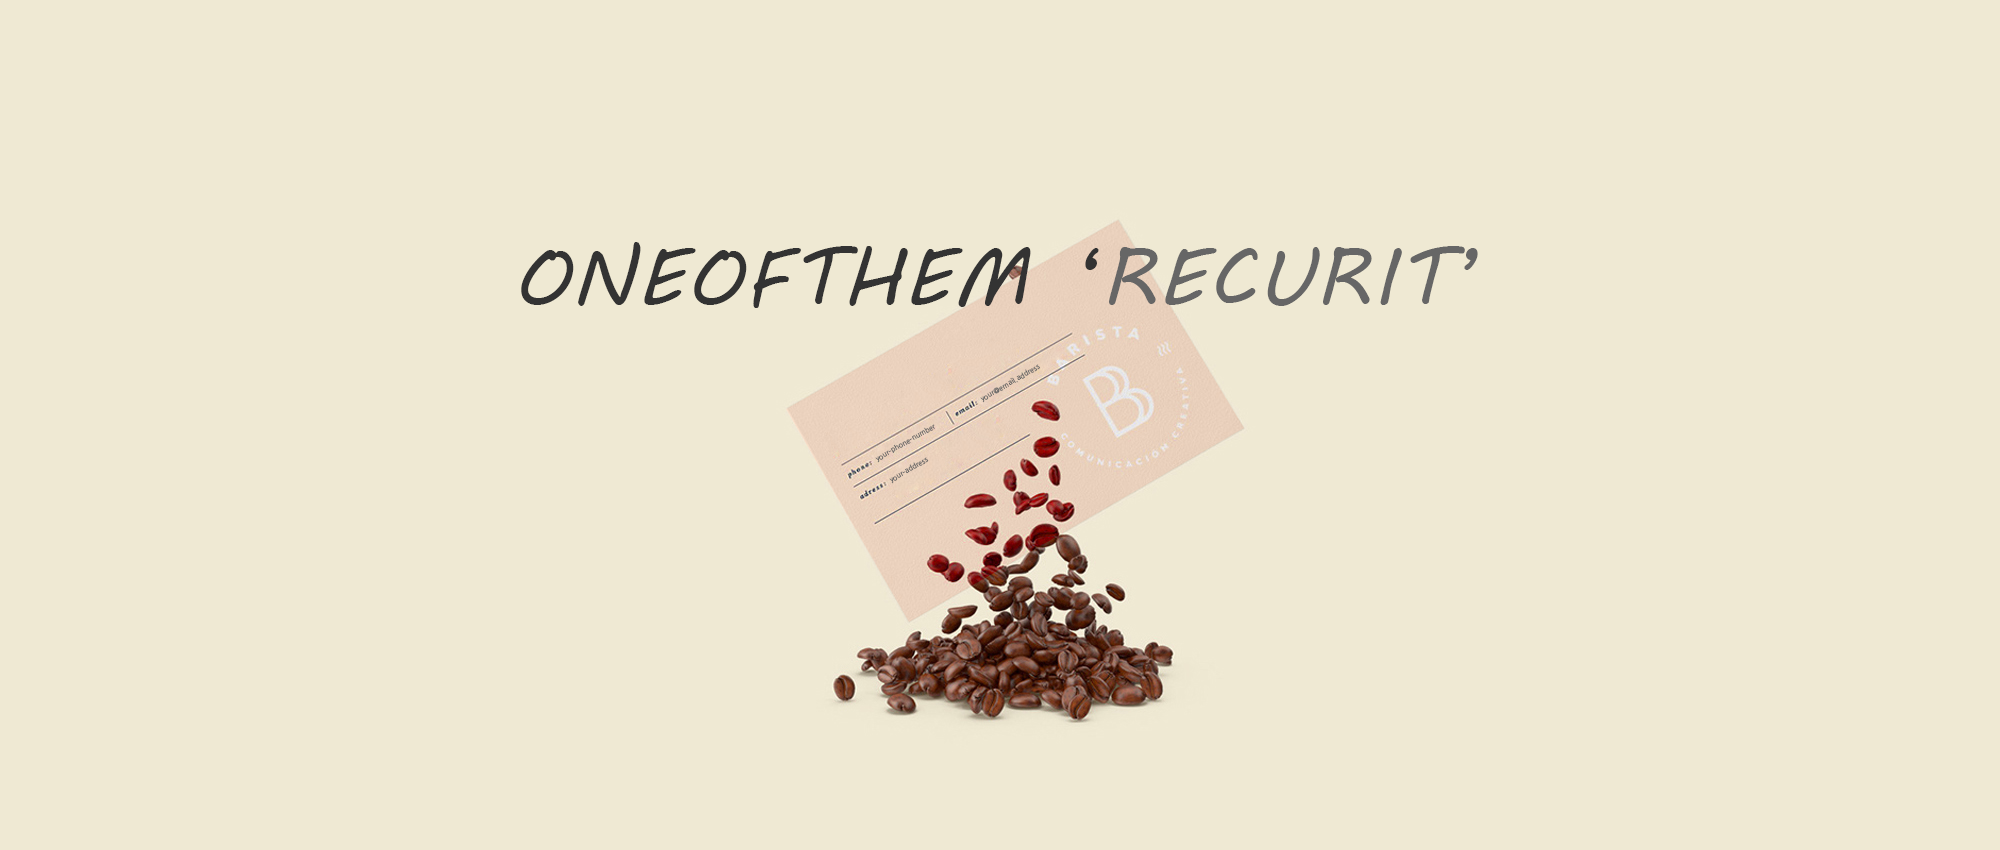
<style>
.page{position:relative;width:2000px;height:850px;background:#efe9d3}
.page>*{position:absolute;margin:0}
.t1{font:80px "MVBoli";letter-spacing:0.02em;color:#333333}
.t2{font:80px "MVBoli";letter-spacing:0.02em;color:#666666}
.t3{font:7px "NanumGothic";letter-spacing:0.02em;color:#666666}
</style>
<div class="page">
<p class="t1" style="left:521px;top:242px;width:957px;height:66px">ONEOFTHEM ‘<span class="t2">RECURIT’</span></p>
<p class="t3" style="left:980px;top:364px;width:60px;height:39px;rotate:-30deg">your@email.address</p>
<p class="t3" style="left:980px;top:364px;width:60px;height:39px;rotate:-30deg">your@email.address</p>
<p class="t3" style="left:875px;top:424px;width:60px;height:39px;rotate:-30deg">your-phone-number</p>
<p class="t3" style="left:875px;top:424px;width:60px;height:39px;rotate:-30deg">your-phone-number</p>
<p class="t3" style="left:889px;top:457px;width:40px;height:27px;rotate:-30deg">your-address</p>
<p class="t3" style="left:889px;top:457px;width:40px;height:27px;rotate:-30deg">your-address</p>
</div>
